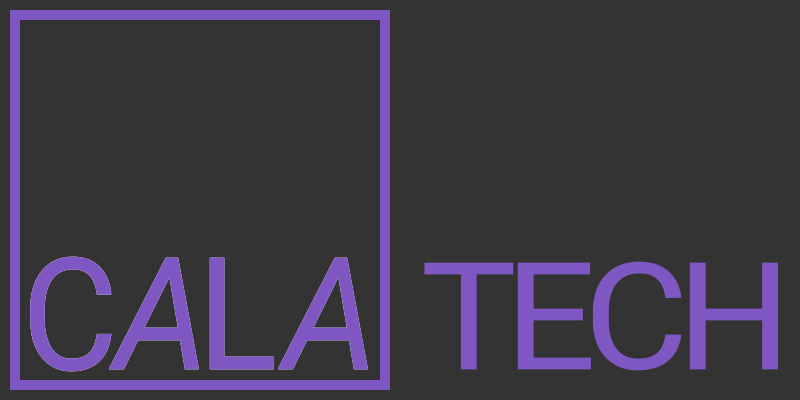
<style>
.page{position:relative;width:800px;height:400px;background:#333333}
.page>*{position:absolute;margin:0}
.t1{font:156.2px "Roboto-Regular";letter-spacing:-0.05em;color:#7e57c2;font-weight:bold;scale:0.94 1}
.t2{font:156.2px "Roboto-Italic";letter-spacing:-0.1em;color:#7e57c2;font-weight:bold;scale:0.94 1}
.t3{font:156.2px "Roboto-Regular";letter-spacing:0.02em;color:#7e57c2;font-weight:bold;scale:0.94 1}
.t4{font:156.2px "Roboto-Italic";color:#7e57c2;font-weight:bold;scale:0.94 1}
.t5{font:149.4px "Roboto-Regular";letter-spacing:-0.1em;color:#7e57c2;font-weight:bold;scale:1.07 1}
</style>
<div class="page">
<p class="t1" style="left:30px;top:256px;width:338px;height:116px">C<span class="t2">A</span><span class="t3">L</span><span class="t4">A</span></p>
<p class="t1" style="left:30px;top:256px;width:338px;height:116px">C<span class="t2">A</span><span class="t3">L</span><span class="t4">A</span></p>
<p class="t5" style="left:424px;top:261px;width:354px;height:110px">TECH</p>
</div>
